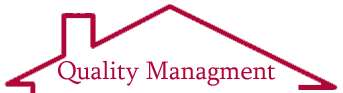
<style>
.page{position:relative;width:343px;height:93px;background:#ffffff}
.page>*{position:absolute;margin:0}
.t1{font:26px "Sylfaen";color:#b1063a}
</style>
<div class="page">
<p class="t1" style="left:58px;top:60px;width:218px;height:26px">Quality Managment</p>
</div>
